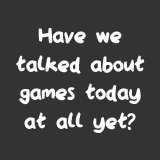
<style>
.page{position:relative;width:160px;height:160px;background:#333333}
.page>*{position:absolute;margin:0}
.t1{font:23.9px "QAReports";color:#ffffff}
</style>
<div class="page">
<p class="t1" style="left:15px;top:28px;width:130px;height:105px;text-align:center">Have we<br>talked about<br>games today<br>at all yet?</p>
</div>
